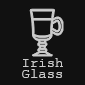
<style>
.page{position:relative;width:85px;height:85px;background:#111111}
.page>*{position:absolute;margin:0}
.t1{font:14px/11px "CourierNewPSMT";color:#cccccc}
</style>
<div class="page">
<p class="t1" style="left:22px;top:58px;width:41px;height:20px;text-align:center">Irish<br>Glass</p>
</div>
